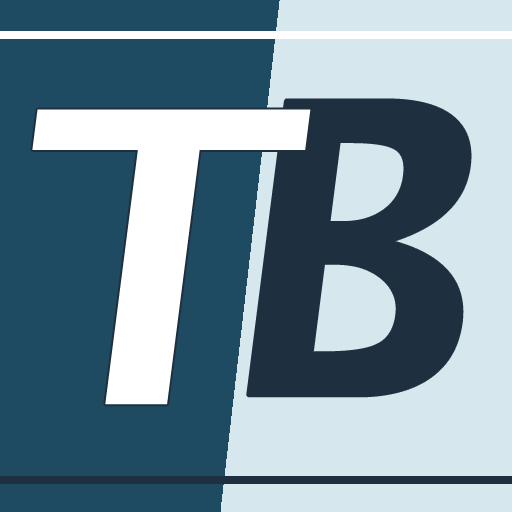
<style>
.page{position:relative;width:512px;height:512px;background:#1e4b62}
.page>*{position:absolute;margin:0}
.t1{font:411px "LucidaGrande-Bold";color:#1e303f}
.t2{font:411px "LucidaGrande-Bold";color:#ffffff}
</style>
<div class="page">
<p class="t1" style="left:248px;top:100px;width:222px;height:296px">B</p>
<p class="t2" style="left:32px;top:109px;width:279px;height:296px">T</p>
</div>
